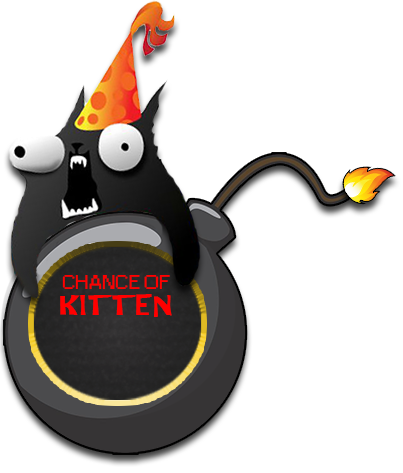
<style>
.page{position:relative;width:403px;height:473px;background:#ffffff}
.page>*{position:absolute;margin:0}
.t1{font:18.8px "Small Fonts";color:#ff0000;scale:1.3 1}
.t2{font:25px "ARCHRISTY";color:#ff0000;scale:1.3 1}
</style>
<div class="page">
<p class="t1" style="left:62px;top:275px;width:108px;height:14px">CHANCE OF</p>
<p class="t2" style="left:60px;top:294px;width:112px;height:23px">KITTEN</p>
</div>
